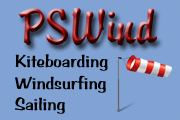
<style>
.page{position:relative;width:180px;height:120px;background:#81a3d4}
.page>*{position:absolute;margin:0}
.t1{font:55px "DARNELL-Normal"}
.t2{font:18px "BRADDON";color:#010101}
</style>
<div class="page">
<p class="t1" style="left:18px;top:8px;width:139px;height:38px">PSWind</p>
<p class="t2" style="left:15px;top:54px;width:93px;height:60px">Kiteboarding<br>Windsurfing<br>Sailing</p>
</div>
